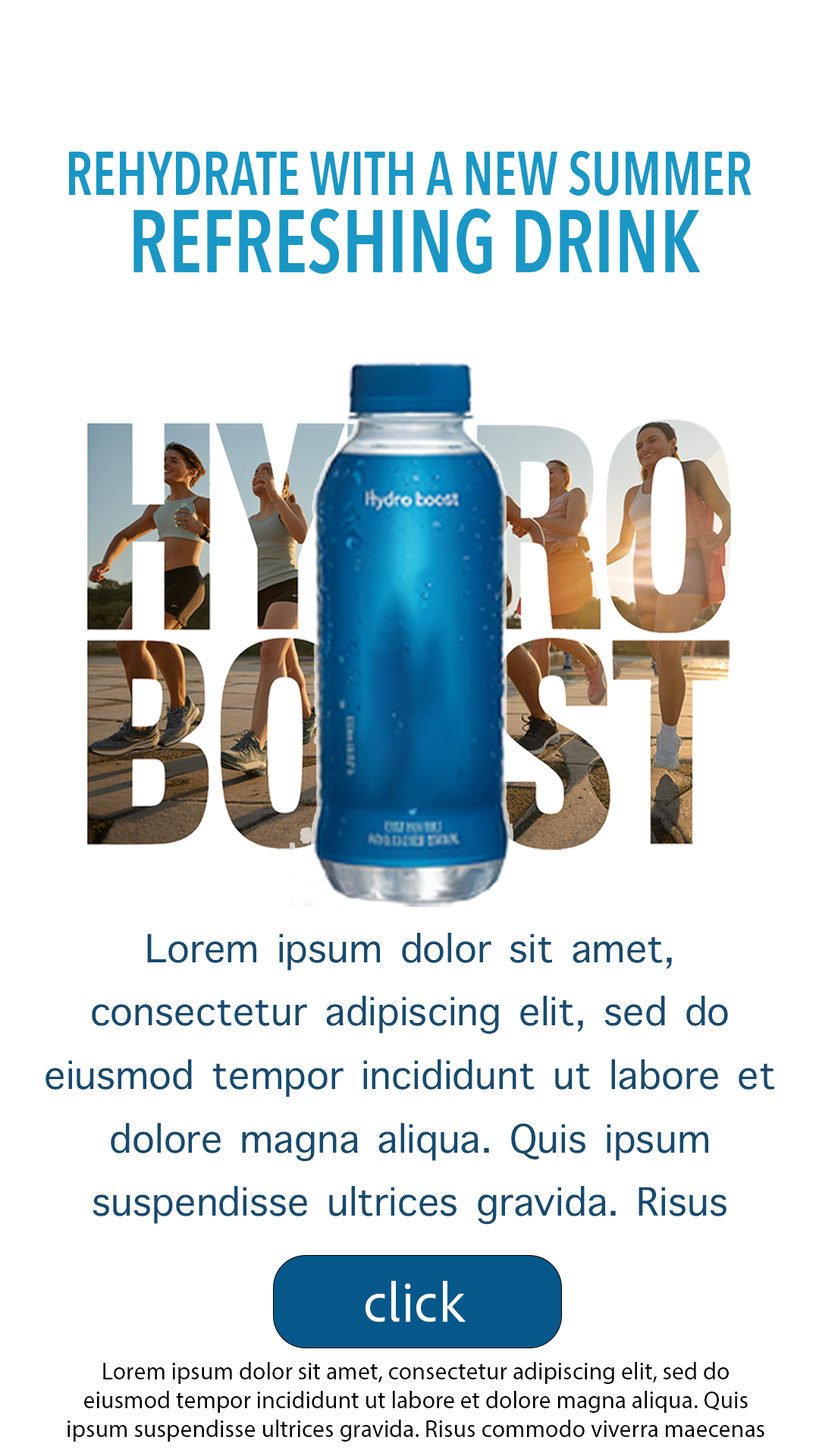
<style>
.page{position:relative;width:819px;height:1456px;background:#ffffff}
.page>*{position:absolute;margin:0}
.t1{font:61px/77.2px "AvenirNextCondensed-DemiBold";color:#1a97c5;scale:0.87 1}
.t2{font:88.2px/77.2px "AvenirNextCondensed-DemiBold";color:#1a97c5;scale:0.87 1}
.t3{font:52.8px "AppleSymbols";color:#164a6e}
.t4{font:52.8px "AppleSymbols";color:#1a97c5}
.t5{font:56px "AdobeCleanUX-Regular";color:#ffffff}
.t6{font:24.2px "MyriadPro-Regular";color:#000000}
</style>
<div class="page">
<p class="t1" style="left:69px;top:151px;width:682px;height:123px;text-align:center">REHYDRATE WITH A NEW SUMMER <br><span class="t2">REFRESHING DRINK</span></p>
<p class="t3" style="left:45px;top:933px;width:729px;height:292px;text-align:center">Lorem ipsum dolor sit amet, consectetur adipiscing elit, sed do eiusmod tempor incididunt ut labore et dolore magna aliqua. Quis ipsum suspendisse ultrices gravida. Risus commodo viverra<span class="t4"> maecenas accumsan lacus vel facilisis.</span></p>
<p class="t5" style="left:366px;top:1281px;width:100px;height:41px">click</p>
<p class="t6" style="left:67px;top:1362px;width:697px;height:80px;text-align:center">Lorem ipsum dolor sit amet, consectetur adipiscing elit, sed do eiusmod tempor incididunt ut labore et dolore magna aliqua. Quis ipsum suspendisse ultrices gravida. Risus commodo viverra maecenas accumsan lacus vel facilisis.</p>
</div>
